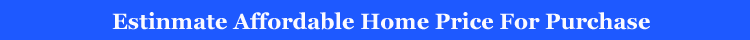
<style>
.page{position:relative;width:750px;height:40px;background:#1e59ff}
.page>*{position:absolute;margin:0}
.t1{font:22px "Georgia-Bold";color:#fbfaff}
</style>
<div class="page">
<p class="t1" style="left:112px;top:12px;width:538px;height:18px">Estinmate Affordable Home Price For Purchase</p>
</div>
